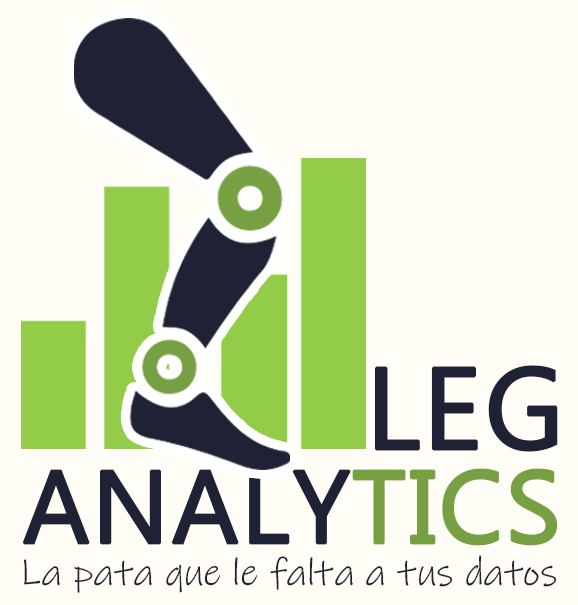
<style>
.page{position:relative;width:578px;height:605px;background:#fffdf6}
.page>*{position:absolute;margin:0}
.t1{font:115px "Gadugi";color:#1e2234;font-weight:bold}
.t2{font:103px "Gadugi";color:#1e2234;font-weight:bold}
.t3{font:103px "Gadugi";color:#77a042;font-weight:bold}
.t4{font:39px "InkFree";color:#1e2234}
</style>
<div class="page">
<p class="t1" style="left:374px;top:365px;width:184px;height:87px">LEG</p>
<p class="t2" style="left:22px;top:468px;width:536px;height:78px">ANALY<span class="t3">TICS</span></p>
<p class="t4" style="left:23px;top:555px;width:534px;height:38px">La pata que le falta a tus datos</p>
</div>
